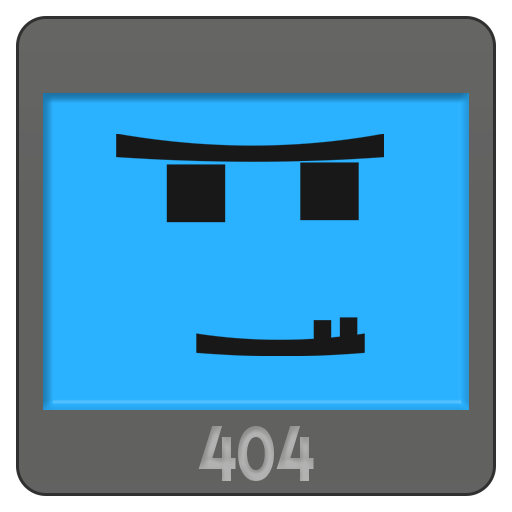
<style>
.page{position:relative;width:512px;height:512px;background:#2ab1ff}
.page>*{position:absolute;margin:0}
.t1{font:69px "LemonMilk";color:#aaabaa;scale:0.83 1}
</style>
<div class="page">
<p class="t1" style="left:198px;top:426px;width:116px;height:55px">404</p>
</div>
